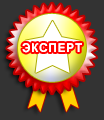
<style>
.page{position:relative;width:104px;height:120px;background:#333333}
.page>*{position:absolute;margin:0}
.t1{font:12px "Arial-BoldMT";letter-spacing:0.05em;color:#ffffff;text-transform:uppercase}
</style>
<div class="page">
<p class="t1" style="left:22px;top:43px;width:60px;height:10px">Эксперт</p>
</div>
